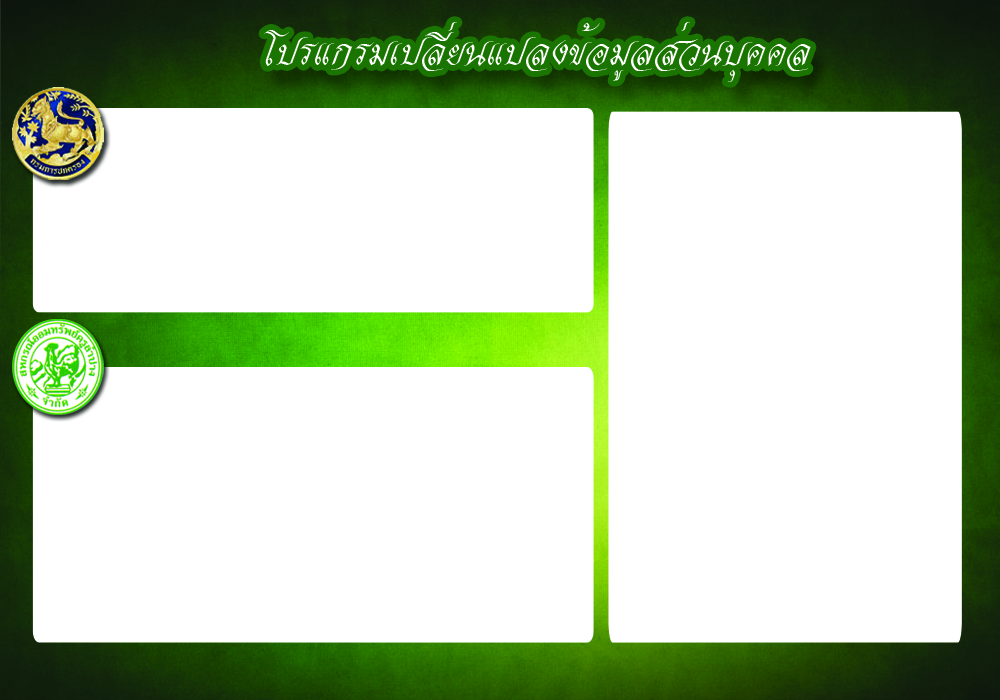
<style>
.page{position:relative;width:1000px;height:700px;background:#ffffff}
.page>*{position:absolute;margin:0}
.t1{font:48px "JSWansika-Italic";color:#ffffff}
</style>
<div class="page">
<p class="t1" style="left:264px;top:22px;width:547px;height:60px">โปรแกรมเปลี่ยนแปลงข้อมูลส่วนบุคคล</p>
</div>
